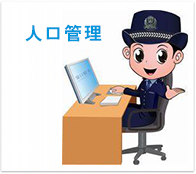
<style>
.page{position:relative;width:196px;height:174px}
.page>*{position:absolute;margin:0}
.t1{font:18px "HYb2gj";letter-spacing:0.1em;color:#0195db}
</style>
<div class="page">
<p class="t1" style="left:25px;top:24px;width:77px;height:18px">人口管理</p>
</div>
